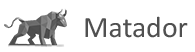
<style>
.page{position:relative;width:195px;height:52px;background:#ffffff}
.page>*{position:absolute;margin:0}
.t1{font:29.7px "Calibri";color:#505050}
</style>
<div class="page">
<p class="t1" style="left:85px;top:16px;width:103px;height:22px">Matador</p>
</div>
